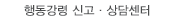
<style>
.page{position:relative;width:190px;height:21px;background:#ffffff}
.page>*{position:absolute;margin:0}
.t1{font:12px "YDIYGO330";color:#4a4c4d}
</style>
<div class="page">
<p class="t1" style="left:24px;top:5px;width:126px;height:11px">행동강령 신고·상담센터</p>
</div>
